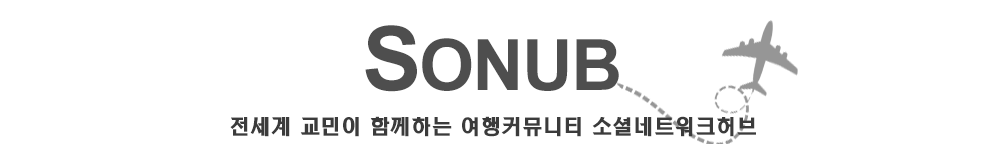
<style>
.page{position:relative;width:1000px;height:144px;background:#ffffff}
.page>*{position:absolute;margin:0}
.t1{font:70.8px "Arial-BoldMT";letter-spacing:-0.025em;color:#4e4e4e}
.t2{font:88.5px "Arial-BoldMT";letter-spacing:-0.025em;color:#4e4e4e}
.t3{font:21.2px "TSTJktB";letter-spacing:-0.025em;color:#3b3b3b}
</style>
<div class="page">
<p class="t1" style="left:365px;top:25px;width:254px;height:67px"><span class="t2">S</span>ONUB</p>
<p class="t3" style="left:230px;top:116px;width:526px;height:21px">전세계 교민이 함께하는 여행커뮤니티 소셜네트워크허브</p>
</div>
